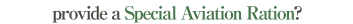
<style>
.page{position:relative;width:353px;height:24px;background:#ffffff}
.page>*{position:absolute;margin:0}
.t1{font:18px "RyuminPro-ExBold";letter-spacing:-0.08em;color:#46754a}
.t2{font:18px "RyuminPro-ExBold";letter-spacing:-0.08em;color:#4c4843}
</style>
<div class="page">
<p class="t1" style="left:52px;top:6px;width:250px;height:17px"><span class="t2">provide a </span>Special Aviation Ration<span class="t2">?</span></p>
</div>
